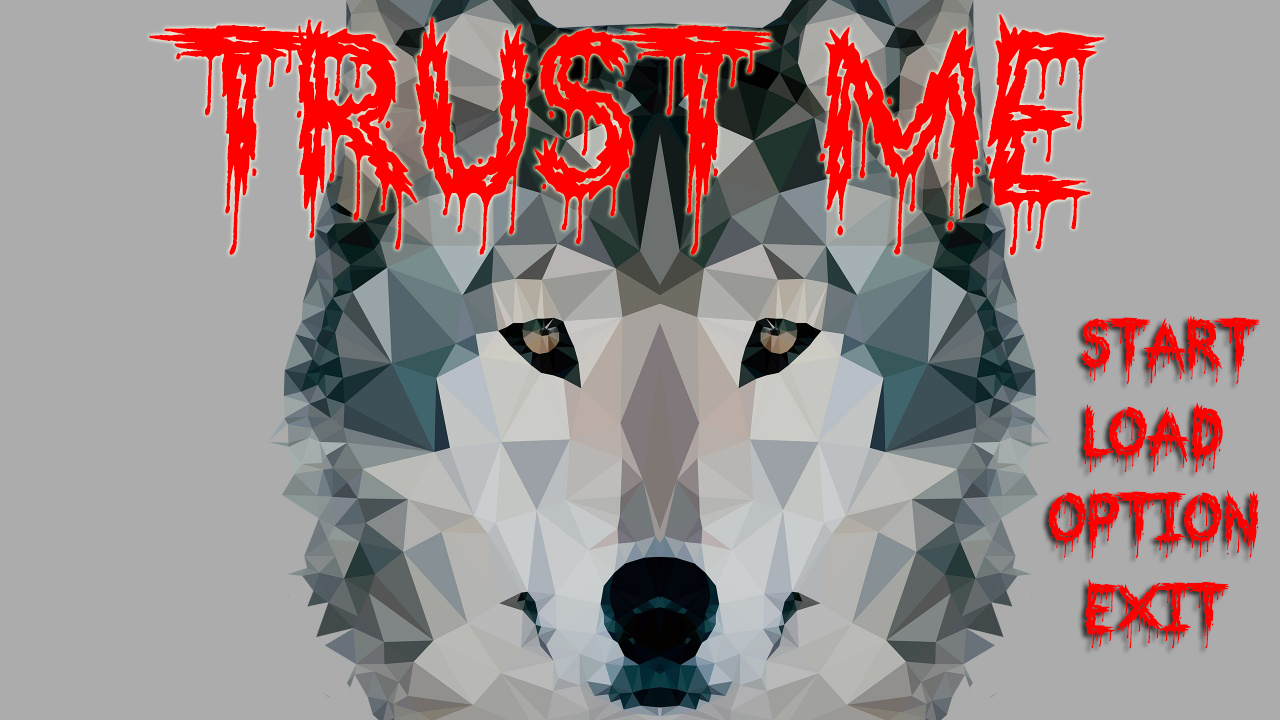
<style>
.page{position:relative;width:1280px;height:720px;background:#acacac}
.page>*{position:absolute;margin:0}
.t1{font:250px "Bloodthirsty";color:#ff0000}
.t2{font:72px "Bloodthirsty";color:#ff0000}
</style>
<div class="page">
<p class="t1" style="left:149px;top:14px;width:956px;height:241px">Trust Me</p>
<p class="t2" style="left:1081px;top:315px;width:179px;height:69px">Start</p>
<p class="t2" style="left:1083px;top:402px;width:140px;height:71px">Load</p>
<p class="t2" style="left:1048px;top:489px;width:211px;height:70px">Option</p>
<p class="t2" style="left:1084px;top:579px;width:146px;height:70px">Exit</p>
</div>
